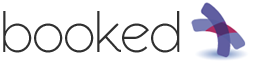
<style>
.page{position:relative;width:266px;height:63px;background:#ffffff}
.page>*{position:absolute;margin:0}
.t1{font:60.5px "RawengulkSans";color:#2f2f2f}
</style>
<div class="page">
<p class="t1" style="left:3px;top:11px;width:177px;height:42px">booked</p>
</div>
